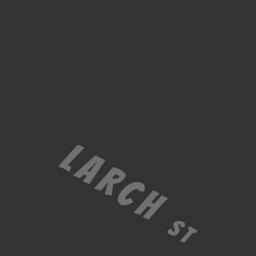
<style>
.page{position:relative;width:256px;height:256px;background:#333333}
.page>*{position:absolute;margin:0}
.t1{font:40px "Bangers-Regular";letter-spacing:0.16em;color:#717171}
.t2{font:24px "Bangers-Regular";letter-spacing:0.16em;color:#717171}
</style>
<div class="page">
<p class="t1" style="left:58px;top:144px;width:140px;height:99px;rotate:31deg">LARCH <span class="t2">st</span></p>
</div>
